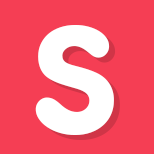
<style>
.page{position:relative;width:154px;height:154px;background:#f53e54}
.page>*{position:absolute;margin:0}
.t1{font:160px "FrankfurterMediumPlain";letter-spacing:-0.01em;color:#ffffff}
</style>
<div class="page">
<p class="t1" style="left:35px;top:25px;width:79px;height:110px">S</p>
<p class="t1" style="left:41px;top:30px;width:79px;height:110px">S</p>
</div>
